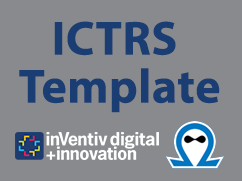
<style>
.page{position:relative;width:242px;height:181px;background:#888a8d}
.page>*{position:absolute;margin:0}
.t1{font:48px/48px "MyriadPro-Bold";letter-spacing:0.01em;color:#1a3d73}
</style>
<div class="page">
<p class="t1" style="left:19px;top:21px;width:201px;height:92px;text-align:center">ICTRS <br>Template</p>
</div>
